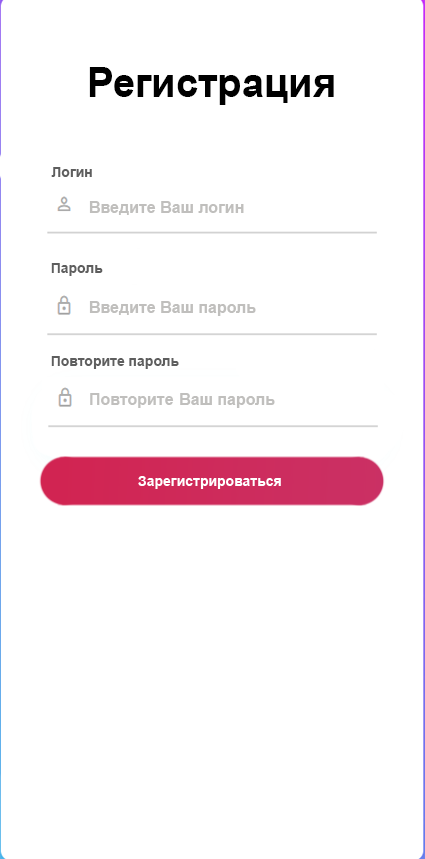
<style>
.page{position:relative;width:425px;height:859px;background:#ffffff}
.page>*{position:absolute;margin:0}
.t1{font:40.9px "Arial-BoldMT";color:#000000}
.t2{font:14px "Arial-BoldMT";color:#5e5e5e}
.t3{font:16px "Arial-BoldMT";color:#c0bfbd}
</style>
<div class="page">
<p class="t1" style="left:89px;top:67px;width:245px;height:38px">Регистрация</p>
<p class="t2" style="left:51px;top:167px;width:41px;height:10px">Логин</p>
<p class="t3" style="left:89px;top:201px;width:155px;height:14px">Введите Ваш логин</p>
<p class="t2" style="left:51px;top:263px;width:52px;height:13px">Пароль</p>
<p class="t2" style="left:51px;top:356px;width:128px;height:13px">Повторите пароль</p>
<p class="t3" style="left:90px;top:393px;width:84px;height:15px">Повторите</p>
</div>
